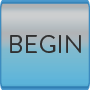
<style>
.page{position:relative;width:90px;height:90px}
.page>*{position:absolute;margin:0}
.t1{font:25px "BrandonGrotesque-Regular";color:#303030}
</style>
<div class="page">
<p class="t1" style="left:10px;top:35px;width:71px;height:18px">BEGIN</p>
</div>
